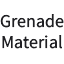
<style>
.page{position:relative;width:64px;height:64px;background:#ffffff}
.page>*{position:absolute;margin:0}
.t1{font:18px "SourceSansRoman-Regular";color:#202024}
</style>
<div class="page">
<p class="t1" style="left:0px;top:14px;width:64px;height:35px;text-align:center">Grenade<br>Material</p>
</div>
